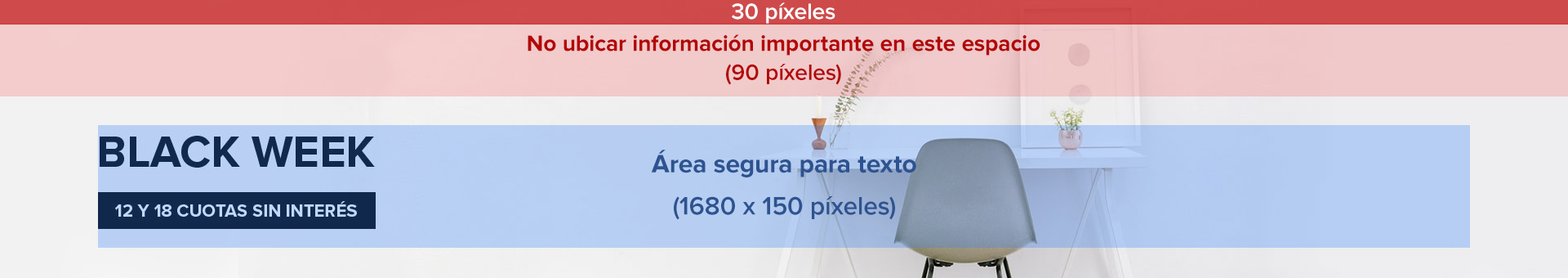
<style>
.page{position:relative;width:1568px;height:278px}
.page>*{position:absolute;margin:0}
.t1{font:23px "ProximaNova-Semibold";color:#ffffff}
.t2{font:23px/28.8px "ProximaNova-Bold";color:#b30606}
.t3{font:23px/28.8px "ProximaNova-Semibold";color:#b30606}
.t4{font:25.9px/42px "ProximaNova-Bold";color:#2d5390}
.t5{font:25.9px/42px "ProximaNova-Semibold";color:#2d5390}
</style>
<div class="page">
<p class="t1" style="left:732px;top:2px;width:103px;height:22px">30 píxeles</p>
<p class="t2" style="left:528px;top:34px;width:512px;height:51px;text-align:center">No ubicar información importante en este espacio<br><span class="t3">(90 píxeles)</span></p>
<p class="t4" style="left:651px;top:149px;width:265px;height:71px;text-align:center">Área segura para texto<br><span class="t5">(1680 x 150 píxeles)</span></p>
</div>
